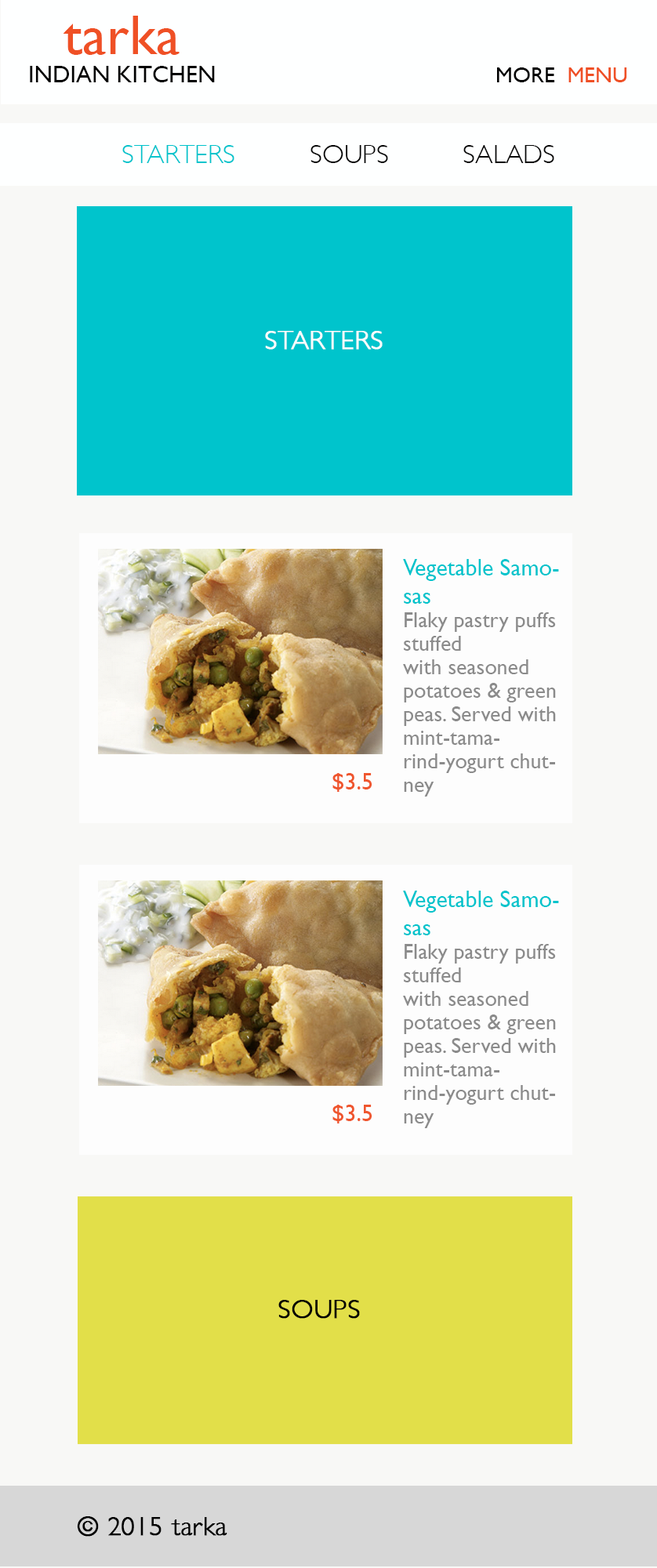
<style>
.page{position:relative;width:657px;height:1568px;background:#f8f8f6}
.page>*{position:absolute;margin:0}
.t1{font:23.5px "GillSans";color:#010101}
.t2{font:56.4px "GillSans";color:#ef5025}
.t3{font:22px "GillSans";color:#000000}
.t4{font:22px "GillSans";color:#ef5025}
.t5{font:26.7px "GillSans-Light";color:#040404}
.t6{font:26.7px "GillSans-Light";color:#00c4cc}
.t7{font:26.7px "GillSans-Light";color:#fafcfc;font-weight:bold}
.t8{font:22px/23.5px "GillSans";color:#8b8b8b}
.t9{font:23.5px "GillSans";color:#00c4cc}
.t10{font:23.5px "GillSans";color:#ef562e}
.t11{font:26.7px "GillSans-Light";color:#030303;font-weight:bold}
.t12{font:26.7px "GillSans-Light";color:#010101;font-weight:bold}
</style>
<div class="page">
<p class="t1" style="left:30px;top:16px;width:185px;height:66px;text-align:center"><span class="t2">tarka<br></span>INDIAN KITCHEN</p>
<p class="t3" style="left:497px;top:67px;width:130px;height:15px">MORE  <span class="t4">MENU</span></p>
<p class="t5" style="left:122px;top:145px;width:432px;height:18px"><span class="t6">STARTERS</span>          SOUPS          SALADS</p>
<p class="t7" style="left:265px;top:331px;width:118px;height:19px">STARTERS</p>
<p class="t8" style="left:403px;top:559px;width:156px;height:238px"><span class="t9">Vegetable Samosas        <br></span>Flaky pastry puffs stuffed <br>with seasoned potatoes &amp; green peas. Served with mint-tamarind-yogurt chutney</p>
<p class="t8" style="left:403px;top:559px;width:156px;height:238px"><span class="t9">Vegetable Samosas        <br></span>Flaky pastry puffs stuffed <br>with seasoned potatoes &amp; green peas. Served with mint-tamarind-yogurt chutney</p>
<p class="t10" style="left:332px;top:773px;width:40px;height:19px">$3.5</p>
<p class="t10" style="left:332px;top:773px;width:40px;height:19px">$3.5</p>
<p class="t8" style="left:403px;top:891px;width:156px;height:237px"><span class="t9">Vegetable Samosas        <br></span>Flaky pastry puffs stuffed <br>with seasoned potatoes &amp; green peas. Served with mint-tamarind-yogurt chutney</p>
<p class="t8" style="left:403px;top:891px;width:156px;height:237px"><span class="t9">Vegetable Samosas        <br></span>Flaky pastry puffs stuffed <br>with seasoned potatoes &amp; green peas. Served with mint-tamarind-yogurt chutney</p>
<p class="t10" style="left:332px;top:1105px;width:40px;height:18px">$3.5</p>
<p class="t10" style="left:332px;top:1105px;width:40px;height:18px">$3.5</p>
<p class="t11" style="left:278px;top:1300px;width:82px;height:19px">SOUPS</p>
<p class="t12" style="left:77px;top:1516px;width:150px;height:21px">© 2015 tarka</p>
</div>
